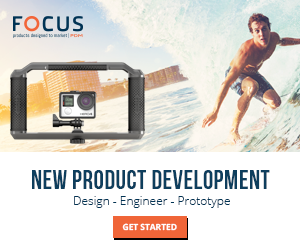
<style>
.page{position:relative;width:300px;height:250px;background:#ffffff}
.page>*{position:absolute;margin:0}
.t1{font:26px "BebasNeueBold";letter-spacing:0.02em;color:#0e3e5d;text-transform:uppercase}
.t2{font:12px "OpenSans-Light";color:#003354}
.t3{font:8.5px "OpenSans-Bold";color:#ffffff}
</style>
<div class="page">
<p class="t1" style="left:32px;top:170px;width:238px;height:19px">new product development</p>
<p class="t2" style="left:74px;top:196px;width:156px;height:12px">Design - Engineer - Prototype</p>
<p class="t3" style="left:122px;top:223px;width:55px;height:8px">GET STARTED</p>
</div>
